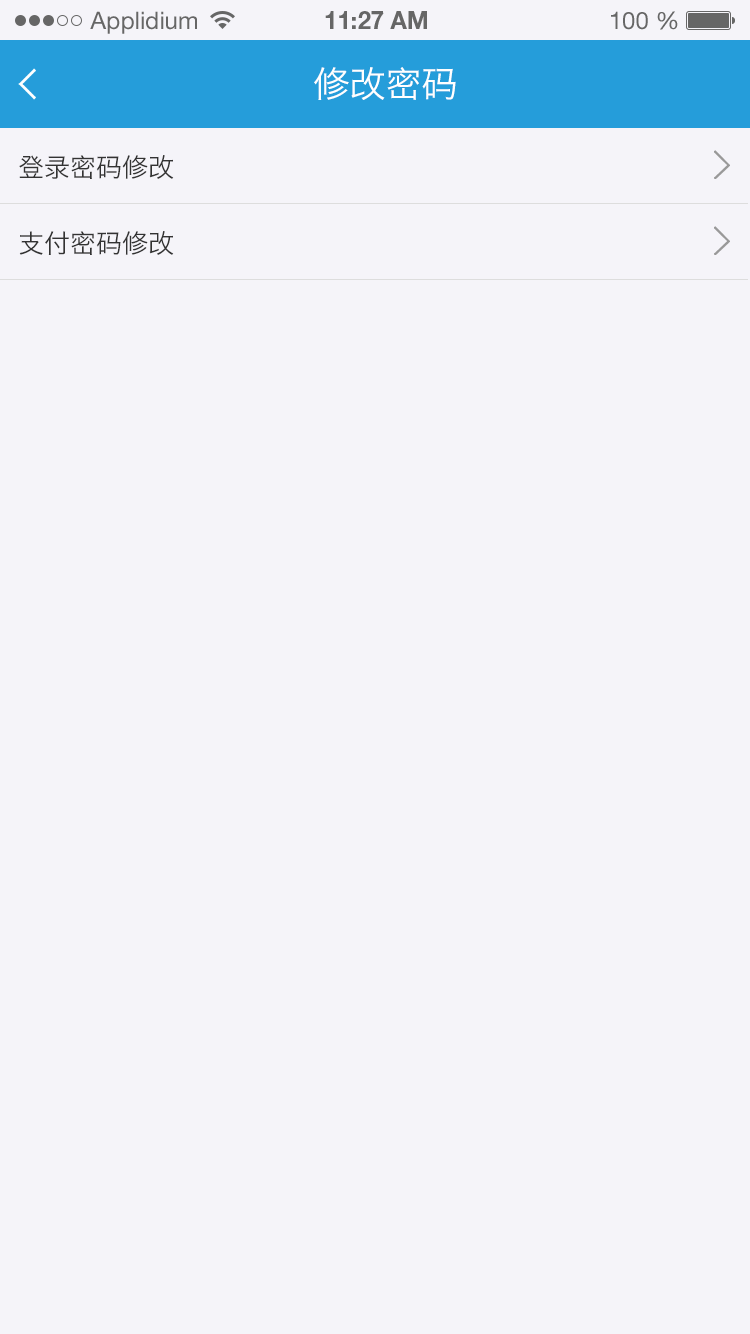
<style>
.page{position:relative;width:750px;height:1334px;background:#f5f4f9}
.page>*{position:absolute;margin:0}
.t1{font:24px "HelveticaNeueLTStd-Roman";color:#666666}
.t2{font:24px "HelveticaNeueLTStd-Bd";color:#666666}
.t3{font:36px "HiraginoSansGB-W3";color:#ffffff;text-transform:uppercase}
.t4{font:26px "HiraginoSansGB-W3";color:#333333;text-transform:uppercase}
</style>
<div class="page">
<p class="t1" style="left:90px;top:11px;width:107px;height:23px">Applidium</p>
<p class="t2" style="left:325px;top:11px;width:102px;height:18px">11:27 AM</p>
<p class="t1" style="left:611px;top:11px;width:67px;height:19px">100 %</p>
<p class="t3" style="left:314px;top:67px;width:142px;height:33px">修改密码</p>
<p class="t4" style="left:19px;top:155px;width:155px;height:24px">登录密码修改</p>
<p class="t4" style="left:19px;top:231px;width:155px;height:24px">支付密码修改</p>
</div>
